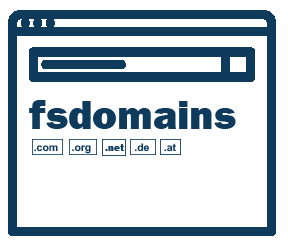
<style>
.page{position:relative;width:288px;height:246px;background:#ffffff}
.page>*{position:absolute;margin:0}
.t1{font:41.7px "FranklinGothic-Heavy";color:#0e3a5c}
.t2{font:10.4px "Arial-BoldMT";color:#0e3a5c}
.t3{font:10.4px "FranklinGothic-Heavy";color:#0e3a5c}
</style>
<div class="page">
<p class="t1" style="left:29px;top:100px;width:207px;height:29px">fsdomains</p>
<p class="t2" style="left:34px;top:145px;width:24px;height:7px">.com</p>
<p class="t2" style="left:72px;top:145px;width:19px;height:9px">.org</p>
<p class="t3" style="left:105px;top:144px;width:19px;height:7px">.net</p>
<p class="t2" style="left:134px;top:143px;width:15px;height:9px">.de</p>
<p class="t2" style="left:164px;top:143px;width:12px;height:9px">.at</p>
</div>
